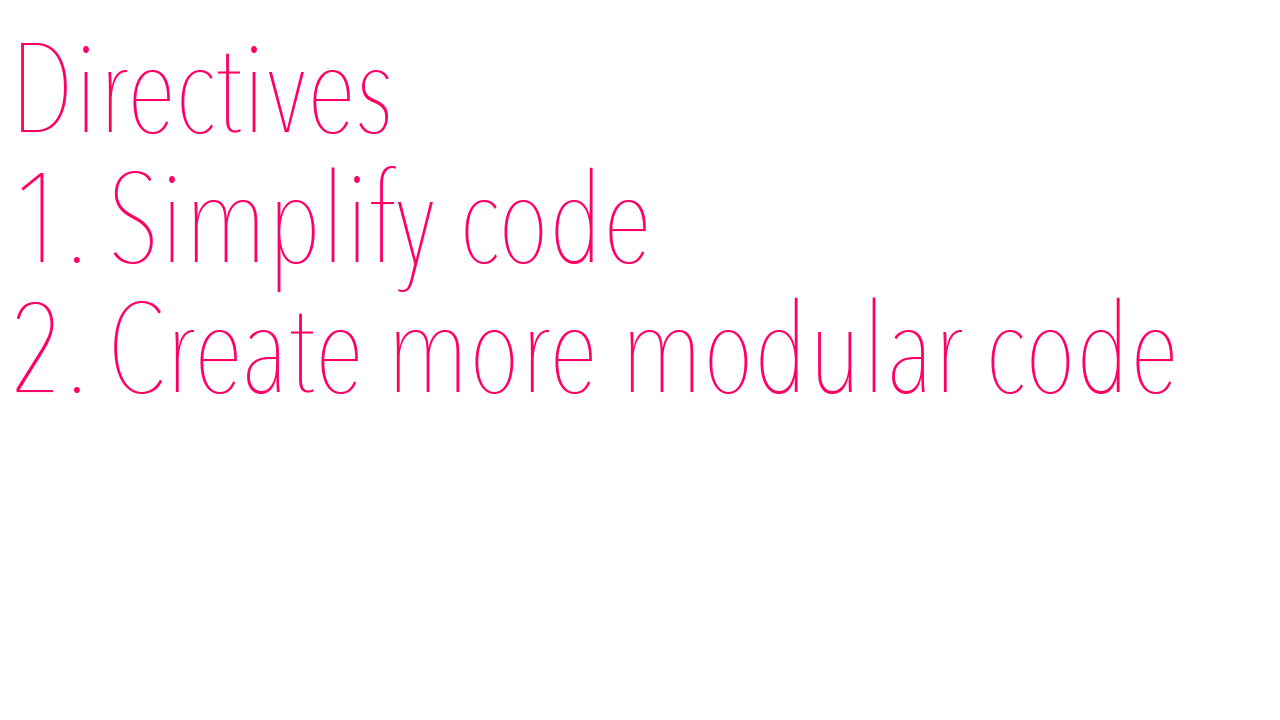
<style>
.page{position:relative;width:1280px;height:720px;background:#ffffff}
.page>*{position:absolute;margin:0}
.t1{font:125px "AvenirNextCondensed-UltraLight";color:#ff0066}
</style>
<div class="page">
<p class="t1" style="left:16px;top:43px;width:1157px;height:351px">Directives<br>1. Simplify code<br>2. Create more modular code</p>
</div>
